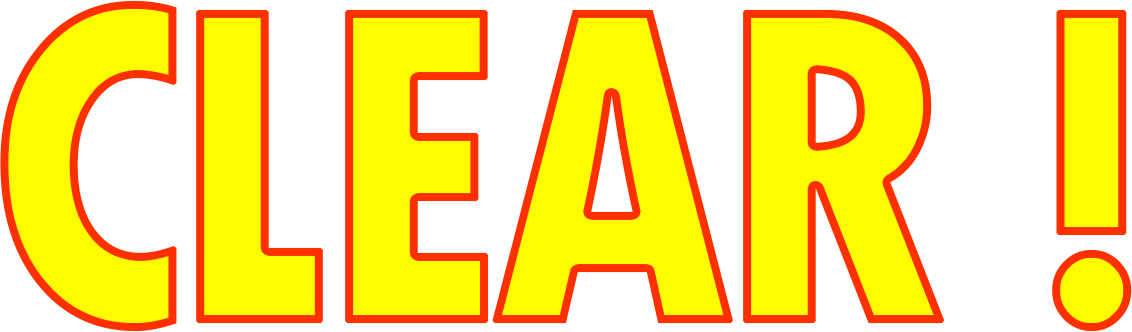
<style>
.page{position:relative;width:1132px;height:332px;background:#ffffff}
.page>*{position:absolute;margin:0}
.t1{font:473.6px "TwCenMT-CondensedExtraBold";letter-spacing:-0.07em;color:#fffc00;font-weight:bold}
</style>
<div class="page">
<p class="t1" style="left:0px;top:0px;width:1132px;height:332px">CLEAR !</p>
</div>
